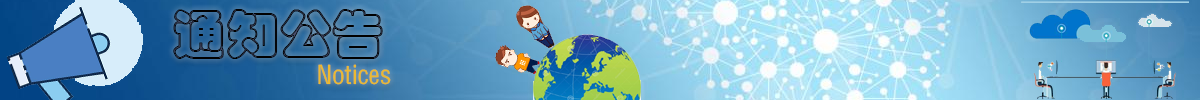
<style>
.page{position:relative;width:1200px;height:100px}
.page>*{position:absolute;margin:0}
.t1{font:52.9px "STCaiyun"}
.t2{font:25.6px "FZYTK--GBK1-0";color:#ecb931}
</style>
<div class="page">
<p class="t1" style="left:173px;top:9px;width:210px;height:50px">通知公告</p>
<p class="t2" style="left:318px;top:64px;width:73px;height:21px">Notices</p>
</div>
